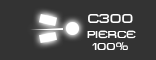
<style>
.page{position:relative;width:156px;height:60px;background:#333333}
.page>*{position:absolute;margin:0}
.t1{font:13px "MetroDF";color:#ffffff}
.t2{font:10.2px "MetroDF";color:#ffffff}
</style>
<div class="page">
<p class="t1" style="left:88px;top:14px;width:45px;height:9px">c300</p>
<p class="t2" style="left:87px;top:30px;width:49px;height:20px">PIERCE<br> 100%</p>
</div>
